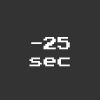
<style>
.page{position:relative;width:100px;height:100px;background:#333333}
.page>*{position:absolute;margin:0}
.t1{font:14px "PressStart2P-Regular";color:#ffffff}
</style>
<div class="page">
<p class="t1" style="left:29px;top:37px;width:41px;height:30px">-25<br>sec</p>
</div>
